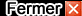
<style>
.page{position:relative;width:82px;height:16px;background:#000000}
.page>*{position:absolute;margin:0}
.t1{font:16px "ArialMT";color:#000000;font-weight:bold}
</style>
<div class="page">
<p class="t1" style="left:7px;top:2px;width:54px;height:13px">Fermer</p>
</div>
